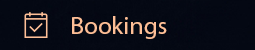
<style>
.page{position:relative;width:255px;height:50px;background:#040813}
.page>*{position:absolute;margin:0}
.t1{font:25px "MyriadPro-Regular";color:#febf97}
</style>
<div class="page">
<p class="t1" style="left:72px;top:16px;width:95px;height:23px">Bookings</p>
</div>
